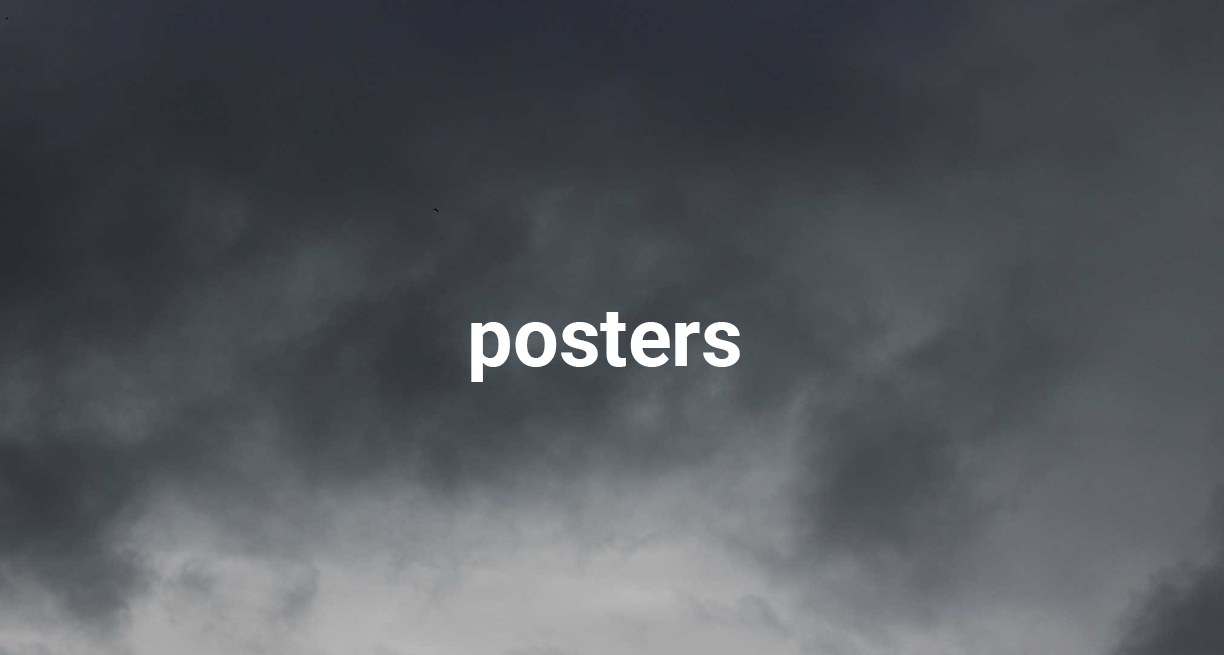
<style>
.page{position:relative;width:1224px;height:655px}
.page>*{position:absolute;margin:0}
.t1{font:80.9px "Roboto-Bold";color:#ffffff}
</style>
<div class="page">
<p class="t1" style="left:471px;top:312px;width:269px;height:70px">posters</p>
</div>
